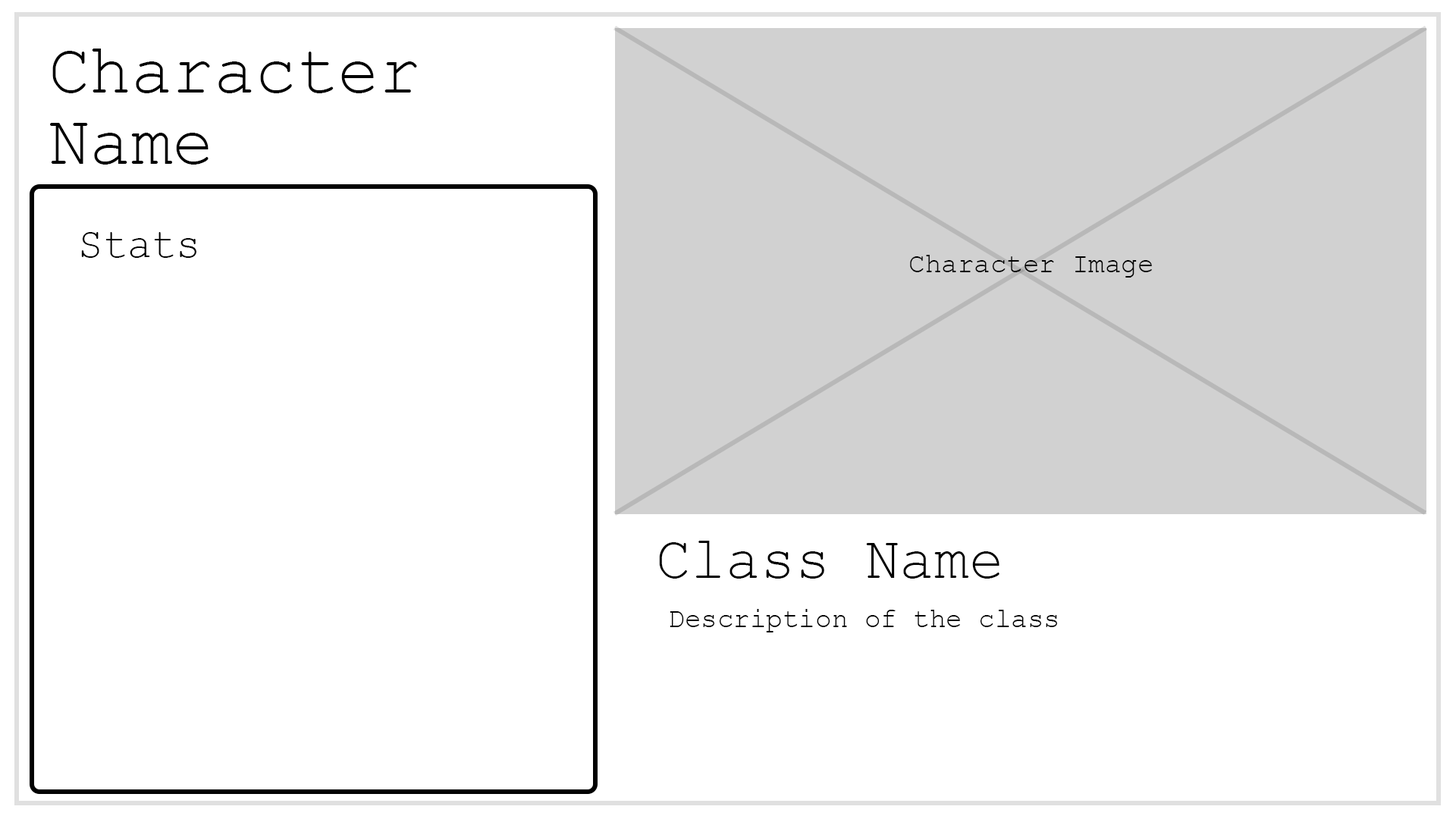
<style>
.page{position:relative;width:1456px;height:819px;background:#ffffff}
.page>*{position:absolute;margin:0}
.t1{font:71.3px "CourierNewPSMT";color:#000000;scale:0.97 1}
.t2{font:42.3px "CourierNewPSMT";color:#000000;scale:0.97 1}
.t3{font:28.2px "CourierNewPSMT";color:#000000;scale:0.97 1}
.t4{font:60.1px "CourierNewPSMT";color:#000000;scale:0.97 1}
</style>
<div class="page">
<p class="t1" style="left:50px;top:49px;width:367px;height:116px">Character Name</p>
<p class="t2" style="left:81px;top:232px;width:115px;height:26px">Stats</p>
<p class="t3" style="left:910px;top:255px;width:242px;height:23px">Character Image</p>
<p class="t4" style="left:659px;top:541px;width:340px;height:38px">Class Name</p>
<p class="t3" style="left:670px;top:609px;width:387px;height:23px">Description of the class</p>
</div>
